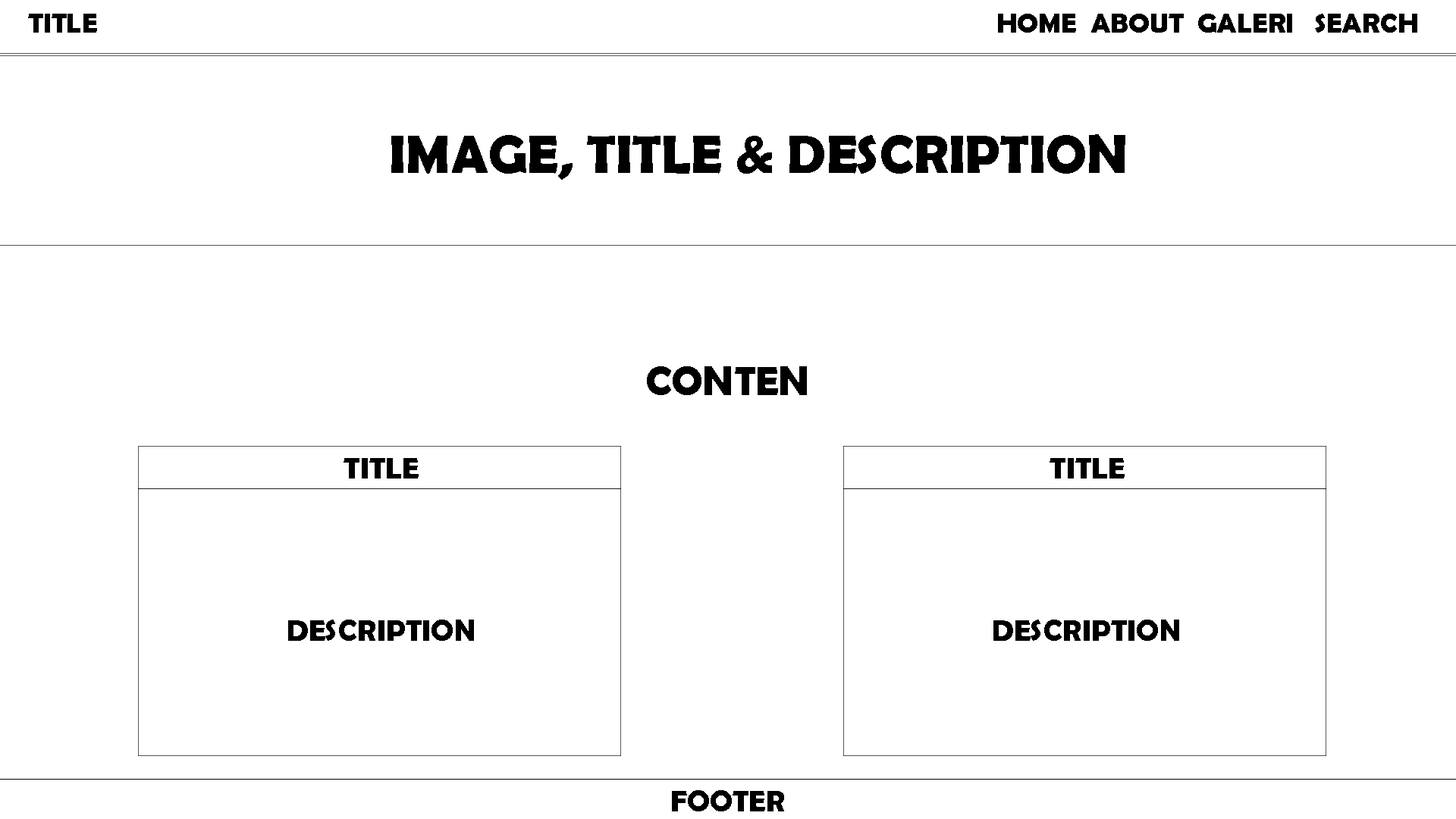
<style>
.page{position:relative;width:1456px;height:819px;background:#ffffff}
.page>*{position:absolute;margin:0}
.t1{font:28px "BerlinSansFBDemi-Bold";color:#000000}
.t2{font:54.7px "BerlinSansFBDemi-Bold";color:#000000}
.t3{font:41.3px "BerlinSansFBDemi-Bold";color:#000000}
.t4{font:30.5px "BerlinSansFBDemi-Bold";color:#000000}
.t5{font:30.3px "BerlinSansFBDemi-Bold";color:#000000}
</style>
<div class="page">
<p class="t1" style="left:28px;top:14px;width:69px;height:19px">TITLE</p>
<p class="t1" style="left:998px;top:14px;width:419px;height:19px">HOME  ABOUT  GALERI   SEARCH</p>
<p class="t2" style="left:391px;top:134px;width:734px;height:46px">IMAGE, TITLE &amp; DESCRIPTION</p>
<p class="t3" style="left:647px;top:366px;width:160px;height:29px">CONTEN</p>
<p class="t4" style="left:344px;top:458px;width:75px;height:21px">TITLE</p>
<p class="t4" style="left:1050px;top:458px;width:75px;height:21px">TITLE</p>
<p class="t4" style="left:288px;top:620px;width:186px;height:21px">DESCRIPTION</p>
<p class="t4" style="left:993px;top:620px;width:186px;height:21px">DESCRIPTION</p>
<p class="t5" style="left:672px;top:790px;width:112px;height:21px">FOOTER</p>
</div>
